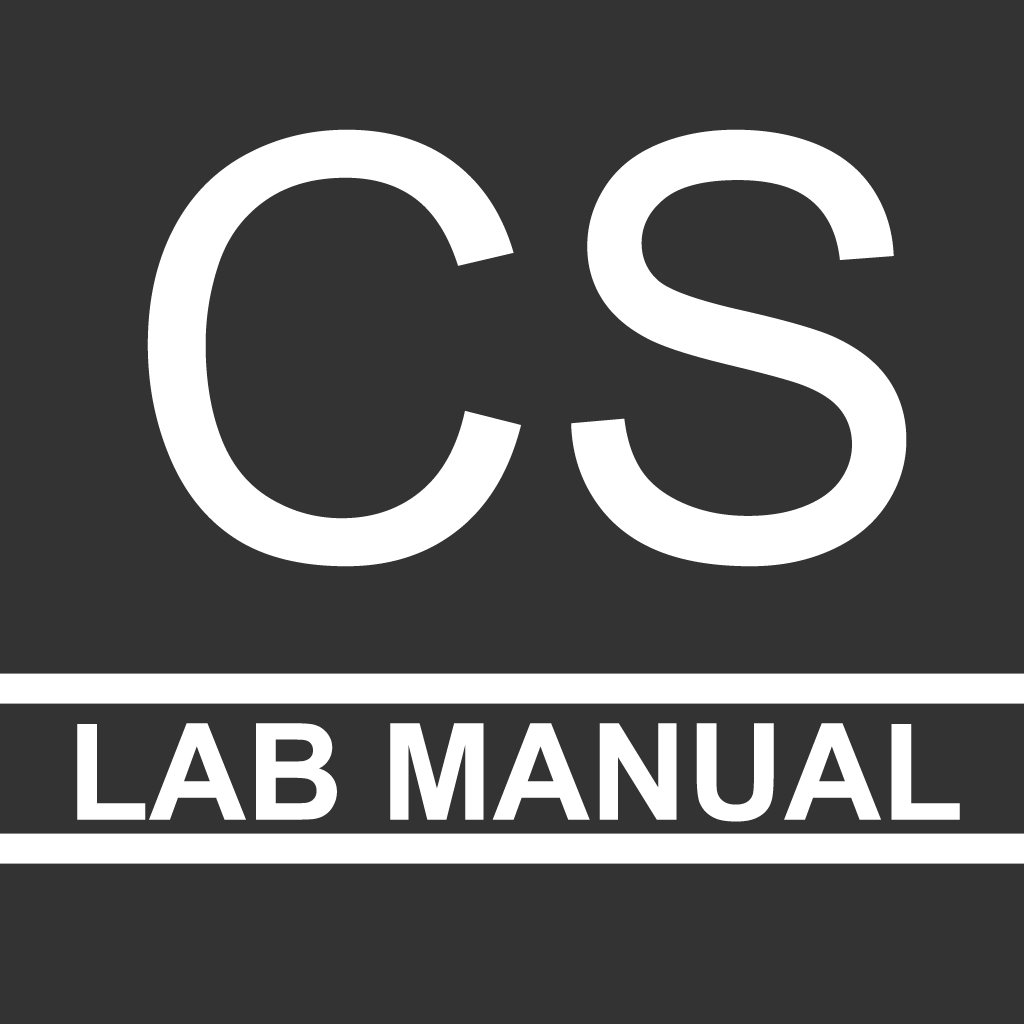
<style>
.page{position:relative;width:1024px;height:1024px;background:#333333}
.page>*{position:absolute;margin:0}
.t1{font:589.4px "ArialMT";color:#ffffff}
.t2{font:134.5px "Arial-BoldMT";color:#ffffff}
</style>
<div class="page">
<p class="t1" style="left:147px;top:129px;width:760px;height:438px">CS</p>
<p class="t2" style="left:77px;top:723px;width:883px;height:99px">LAB MANUAL</p>
</div>
